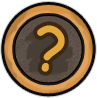
<style>
.page{position:relative;width:97px;height:98px;background:#ffffff}
.page>*{position:absolute;margin:0}
.t1{font:60px "ComicSansMS";color:#e5a83d;font-weight:bold}
</style>
<div class="page">
<p class="t1" style="left:37px;top:25px;width:28px;height:47px">?</p>
</div>
